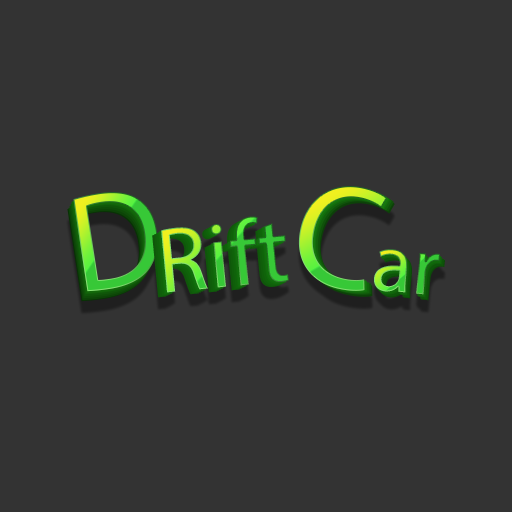
<style>
.page{position:relative;width:512px;height:512px;background:#333333}
.page>*{position:absolute;margin:0}
.t1{font:140.3px "MyriadPro-Regular"}
.t2{font:149.7px "MyriadPro-Regular"}
.t3{font:93.5px "MyriadPro-Regular"}
.t4{font:84.2px "MyriadPro-Regular"}
</style>
<div class="page">
<p class="t1" style="left:73px;top:192px;width:85px;height:100px;rotate:-9deg">D</p>
<p class="t2" style="left:298px;top:186px;width:89px;height:105px;rotate:14deg">C</p>
<p class="t3" style="left:161px;top:216px;width:128px;height:77px;rotate:-5deg">Rift</p>
<p class="t4" style="left:374px;top:249px;width:66px;height:46px;rotate:5deg">ar</p>
</div>
